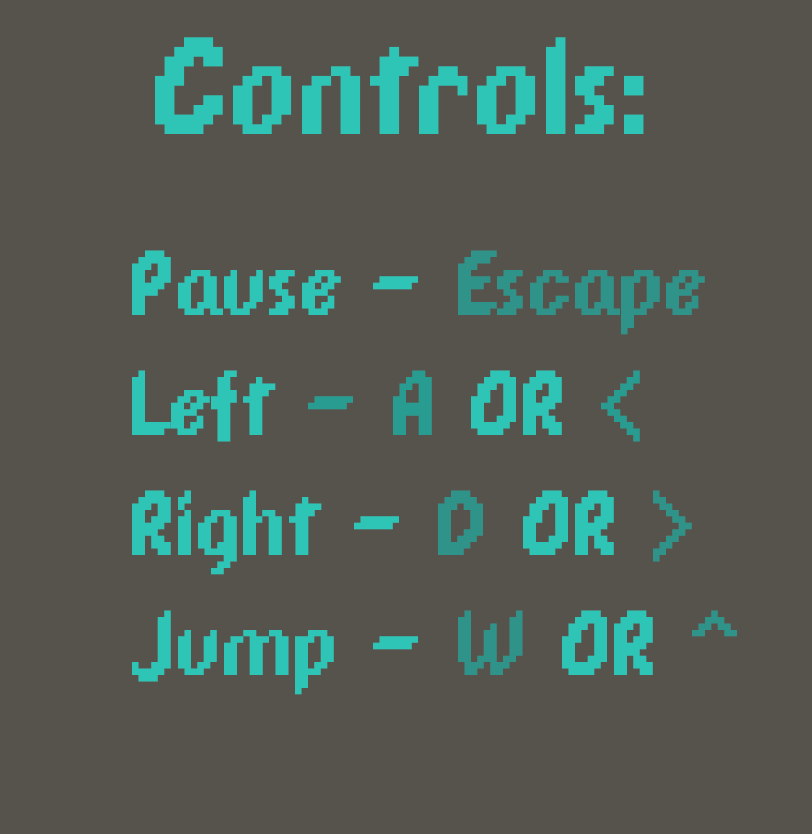
<style>
.page{position:relative;width:812px;height:834px;background:#56534c}
.page>*{position:absolute;margin:0}
.t1{font:150px "DPComicRegular";color:#2ec4b6}
.t2{font:100px "DPComicRegular";color:#2ec4b6}
.t3{font:100px "DPComicRegular";color:#309389}
.t4{font:100px "DPComicRegular";color:#299c91}
</style>
<div class="page">
<p class="t1" style="left:155px;top:37px;width:489px;height:97px">Controls:</p>
<p class="t2" style="left:132px;top:250px;width:605px;height:445px">Pause - <span class="t3">Escape<br></span>Left <span class="t4">- A </span>OR<span class="t4"> &lt;<br></span>Right - <span class="t3">D</span> OR <span class="t3">&gt;<br></span>Jump - <span class="t3">W</span> OR <span class="t3">^</span></p>
</div>
